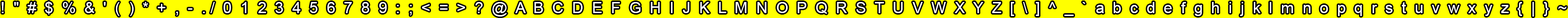
<style>
.page{position:relative;width:1568px;height:18px;background:#ffff00}
.page>*{position:absolute;margin:0}
.t1{font:15.5px "ArialMT";color:#ffffff}
</style>
<div class="page">
<p class="t1" style="left:1px;top:1px;width:1566px;height:15px">!  "  #  $  %  &amp;  '  (  )  *  +  ,  -  . /  0  1  2  3  4  5  6  7  8  9  :  ;  &lt;  =  &gt;  ?  @  A  B  C  D  E  F  G  H  I  J  K  L  M  N  O  P  Q  R  S  T  U  V  W  X  Y  Z  [  \  ]  ^  _  `  a  b  c  d  e  f  g  h  i  j  k  l  m  n  o  p  q  r  s  t  u  v  w  x  y  z  {  |  }  ~</p>
</div>
